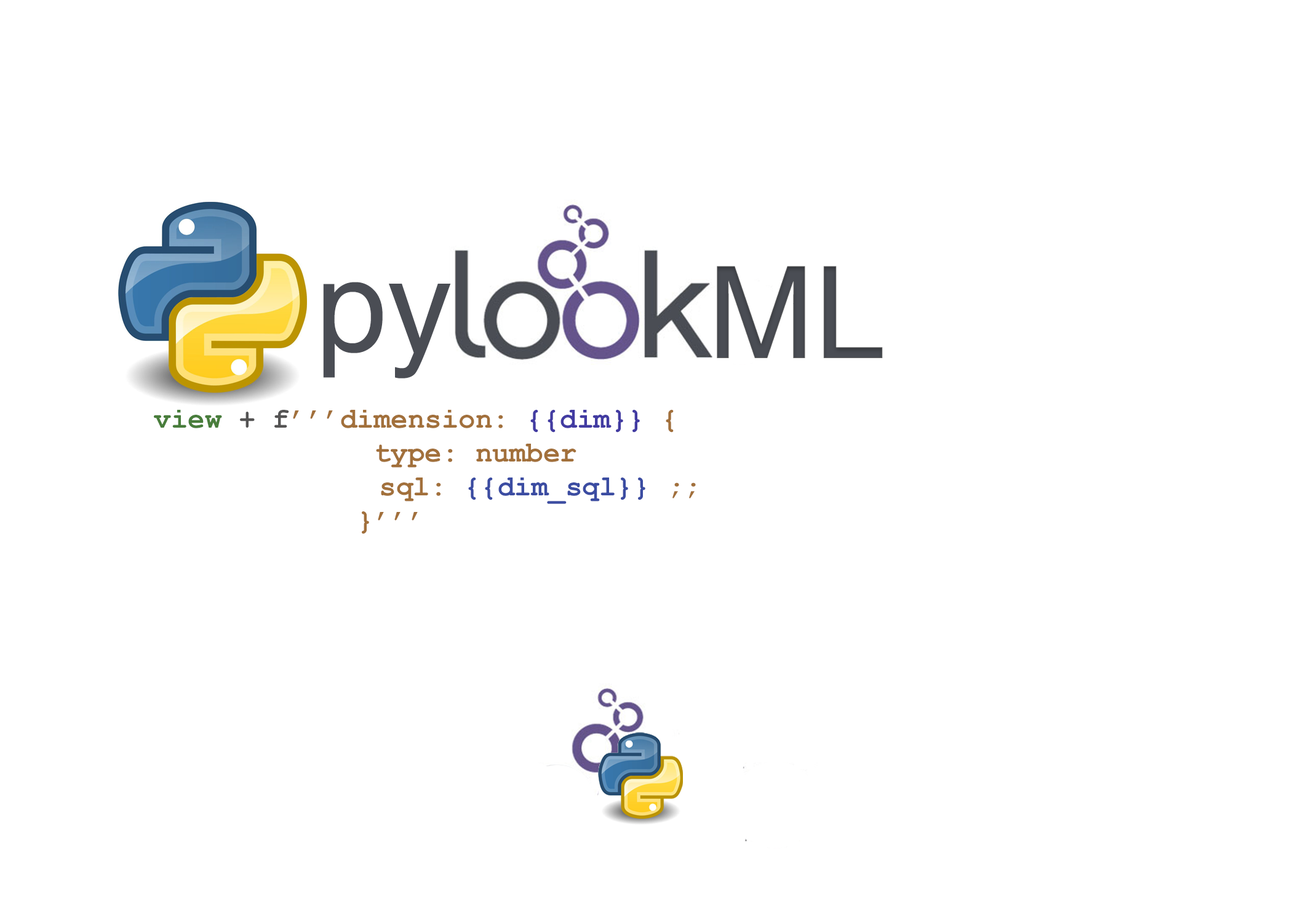
<style>
.page{position:relative;width:1292px;height:923px;background:#ffffff}
.page>*{position:absolute;margin:0}
.t1{font:128.2px "Helvetica";color:#4a4d54}
.t2{font:28.2px "CourierNewPS-BoldMT";color:#a2703b}
.t3{font:28.2px "CourierNewPS-BoldMT";color:#487d3b}
.t4{font:28.2px "CourierNewPS-BoldMT";color:#555454}
.t5{font:28.2px "CourierNewPS-BoldMT";color:#423ba2}
.t6{font:28.2px "CourierNewPS-BoldMT";color:#3b4ca2}
</style>
<div class="page">
<p class="t1" style="left:717px;top:266px;width:166px;height:92px">ML</p>
<p class="t1" style="left:323px;top:282px;width:128px;height:96px">py</p>
<p class="t2" style="left:154px;top:410px;width:542px;height:124px"><span class="t3">view</span><span class="t4"> + f</span>’’’dimension: <span class="t5">{{dim}}</span> {<br>             type: number<br>             sql: <span class="t6">{{dim_sql}}</span> ;;<br>            }’’’</p>
</div>
